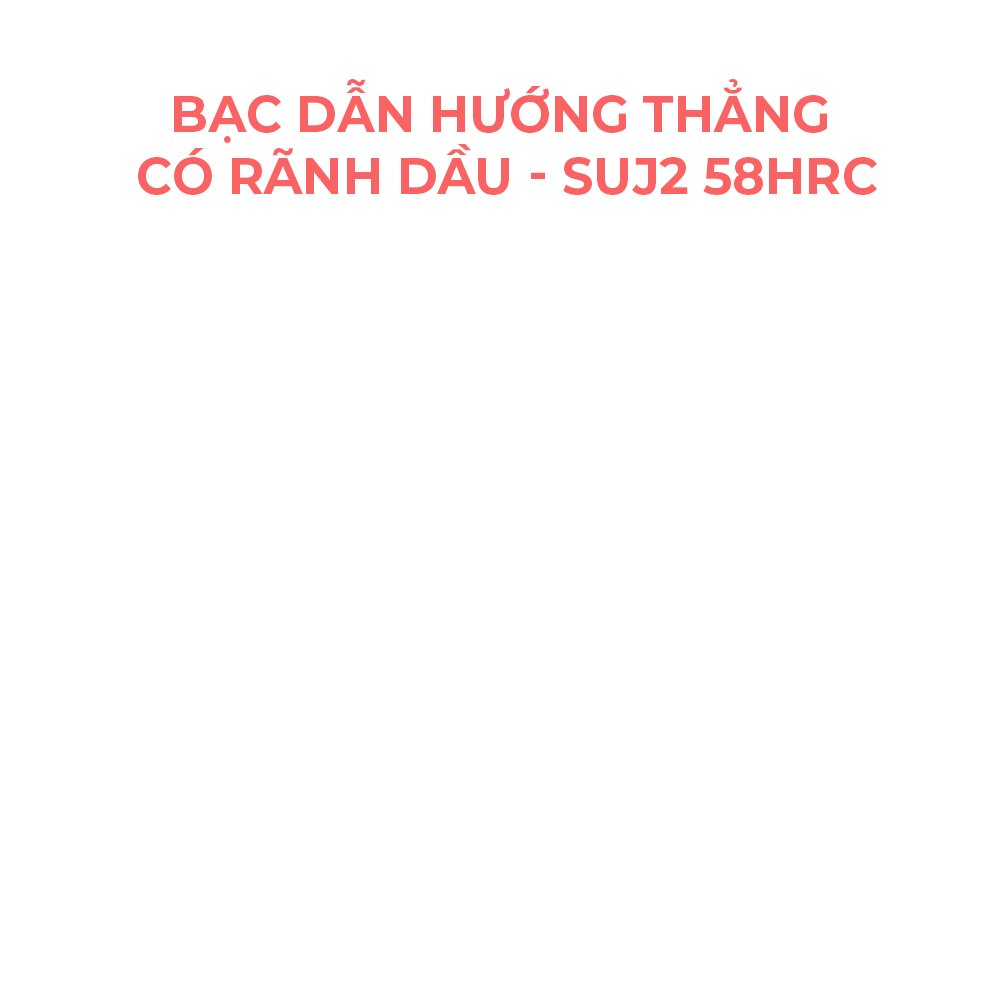
<style>
.page{position:relative;width:1000px;height:1000px;background:#ffffff}
.page>*{position:absolute;margin:0}
.t1{font:51px "Montserrat-Bold";color:#fa6363;text-transform:uppercase}
</style>
<div class="page">
<p class="t1" style="left:138px;top:79px;width:739px;height:116px;text-align:center">Bạc Dẫn Hướng Thẳng  <br> Có Rãnh Dầu - SUJ2 58HRC</p>
</div>
